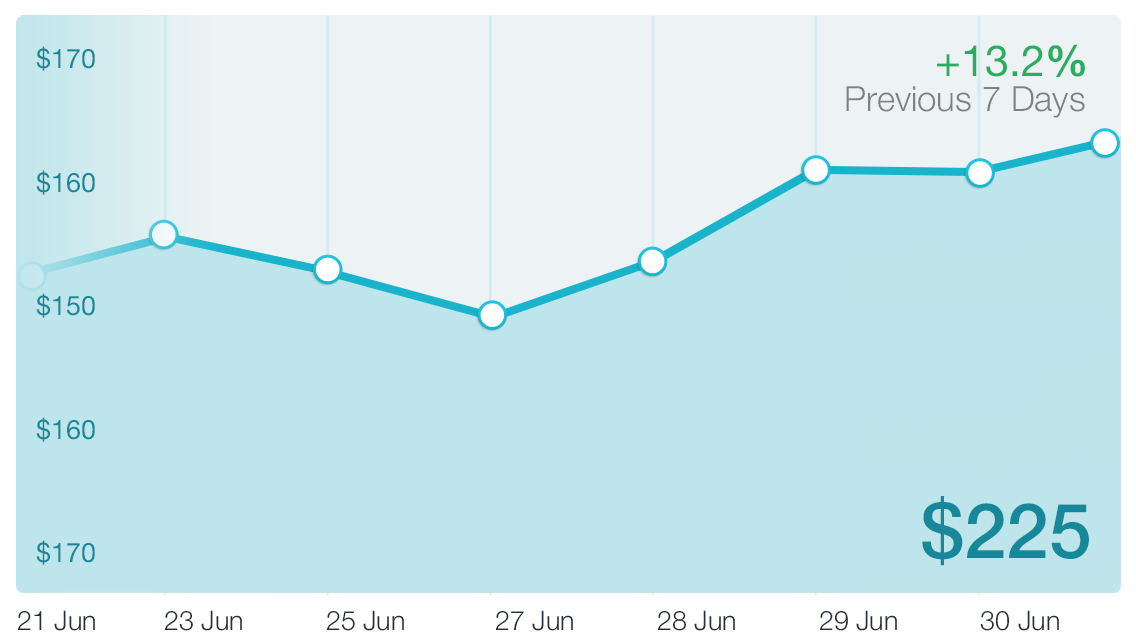
<style>
.page{position:relative;width:1136px;height:640px;background:#bee5eb}
.page>*{position:absolute;margin:0}
.t1{font:26.9px/123.6px "HelveticaNeue";color:#16889a}
.t2{font:43.2px "HelveticaNeue";color:#27ae60}
.t3{font:43.2px "HelveticaNeue-Bold";color:#27ae60}
.t4{font:34.8px "HelveticaNeue-Light";color:#808080}
.t5{font:76.6px "HelveticaNeue-Medium";color:#16889a}
.t6{font:26.9px "HelveticaNeue-Light";color:#252f39}
</style>
<div class="page">
<p class="t1" style="left:36px;top:46px;width:59px;height:519px">$170<br>$160<br>$150<br>$160<br>$170</p>
<p class="t2" style="left:937px;top:44px;width:148px;height:33px">+13.2<span class="t3">%</span></p>
<p class="t4" style="left:846px;top:86px;width:239px;height:32px">Previous 7 Days</p>
<p class="t5" style="left:922px;top:496px;width:167px;height:70px">$225</p>
<p class="t6" style="left:18px;top:610px;width:1041px;height:21px">21 Jun         23 Jun           25 Jun            27 Jun           28 Jun           29 Jun           30 Jun</p>
</div>
